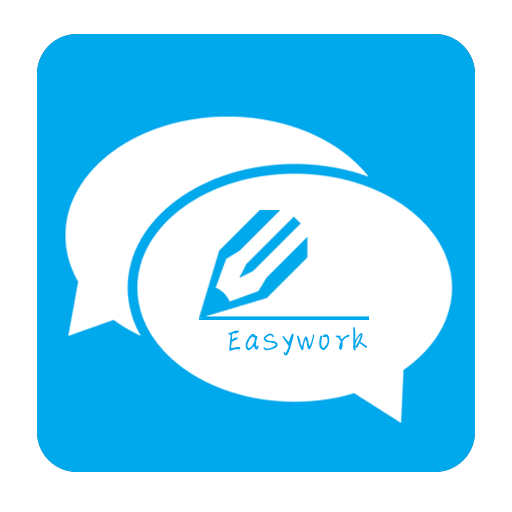
<style>
.page{position:relative;width:512px;height:512px;background:#ffffff}
.page>*{position:absolute;margin:0}
.t1{font:34px "--";color:#00a9ec;font-weight:bold}
</style>
<div class="page">
<p class="t1" style="left:228px;top:327px;width:140px;height:29px">Easywork</p>
</div>
